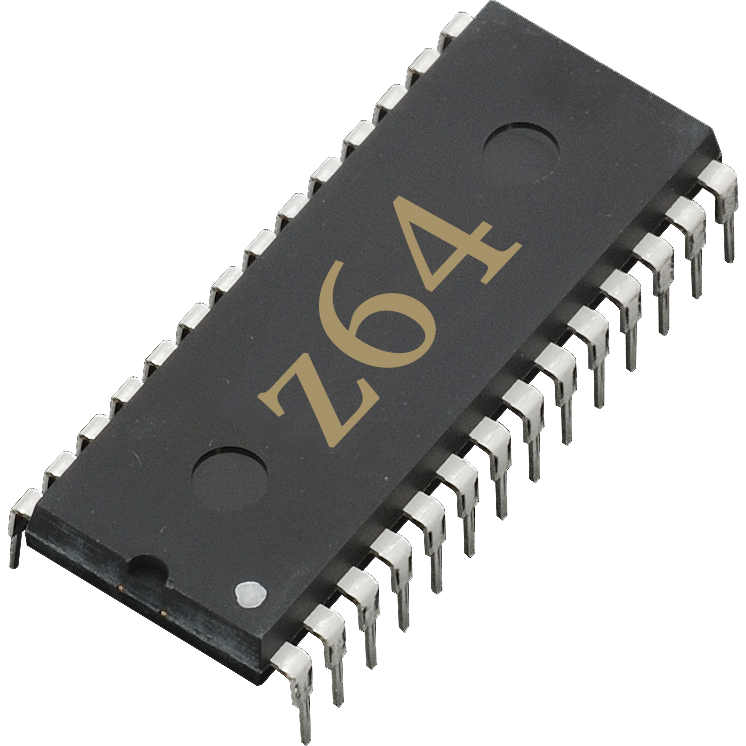
<style>
.page{position:relative;width:746px;height:746px;background:#ffffff}
.page>*{position:absolute;margin:0}
.t1{font:200px "MinionPro-Regular";color:#a79369;font-weight:bold}
</style>
<div class="page">
<p class="t1" style="left:257px;top:195px;width:265px;height:253px;rotate:-47deg">z64</p>
</div>
